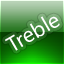
<style>
.page{position:relative;width:64px;height:64px}
.page>*{position:absolute;margin:0}
.t1{font:19.8px "MicrosoftYaHei";color:#ffffff}
</style>
<div class="page">
<p class="t1" style="left:5px;top:16px;width:55px;height:35px;rotate:-30deg">Treble</p>
</div>
